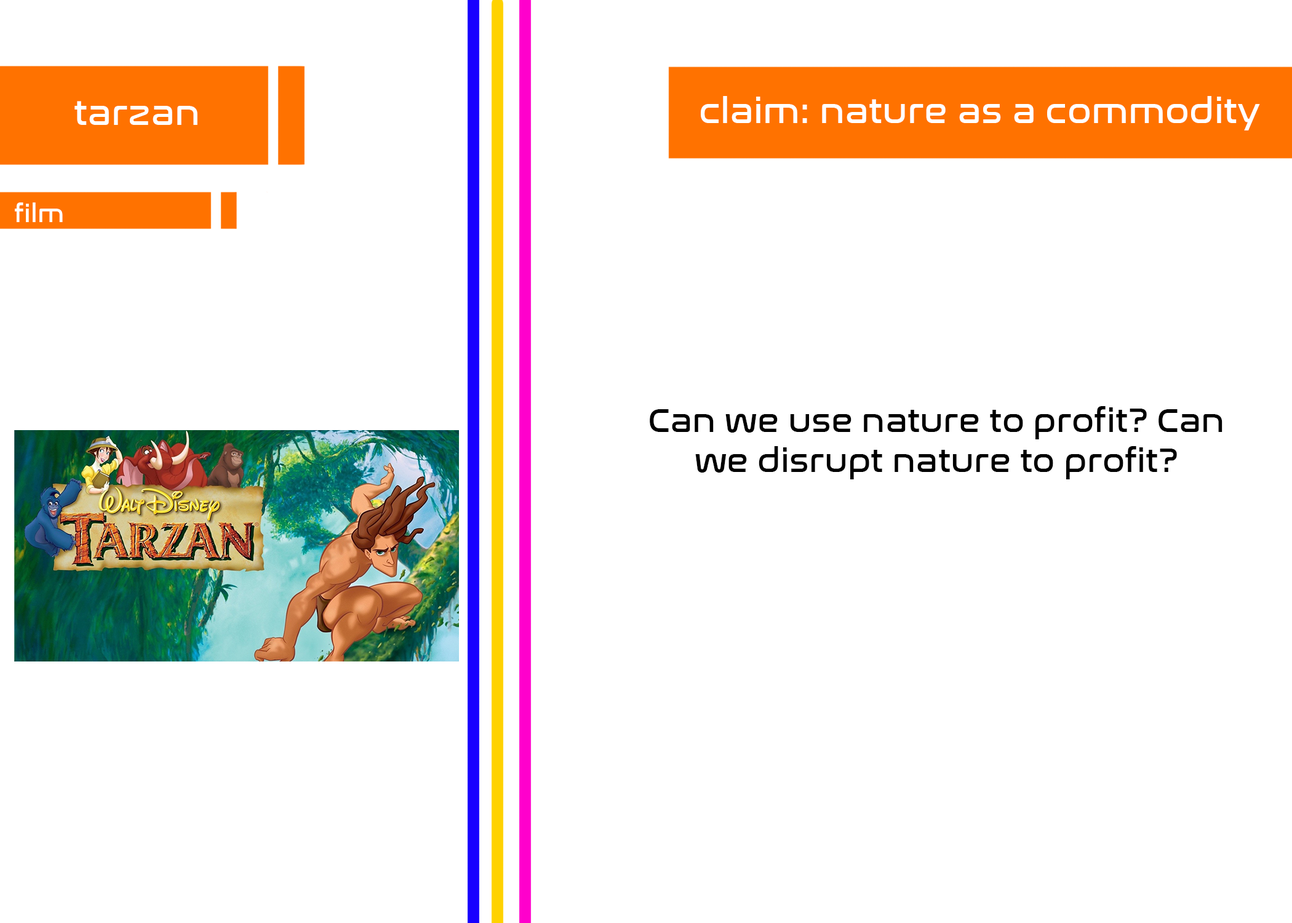
<style>
.page{position:relative;width:1292px;height:923px;background:#ffffff}
.page>*{position:absolute;margin:0}
.t1{font:35.9px "NasalizationRg-Regular";color:#ffffff}
.t2{font:25.6px "NasalizationRg-Regular";color:#ffffff}
.t3{font:33.3px "NasalizationRg-Regular";color:#000000}
</style>
<div class="page">
<p class="t1" style="left:74px;top:101px;width:123px;height:24px">tarzan</p>
<p class="t1" style="left:701px;top:96px;width:559px;height:34px">claim: nature as a commodity</p>
<p class="t2" style="left:15px;top:202px;width:48px;height:20px">film</p>
<p class="t3" style="left:650px;top:406px;width:573px;height:73px;text-align:center">Can we use nature to profit? Can we disrupt nature to profit?</p>
</div>
